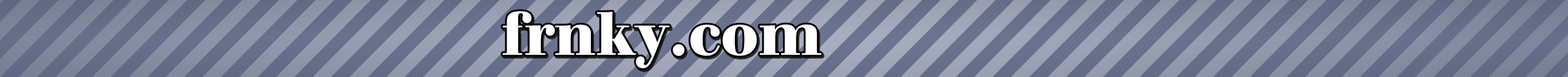
<style>
.page{position:relative;width:1568px;height:77px}
.page>*{position:absolute;margin:0}
.t1{font:60.2px "WalbaumBook-Bold";color:#ffffff}
</style>
<div class="page">
<p class="t1" style="left:502px;top:11px;width:319px;height:57px">frnky.com</p>
</div>
